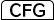
<style>
.page{position:relative;width:54px;height:20px;background:#ffffff}
.page>*{position:absolute;margin:0}
.t1{font:17px "RodinNTLGPro-DB";color:#000000}
</style>
<div class="page">
<p class="t1" style="left:10px;top:3px;width:35px;height:14px">CFG</p>
</div>
